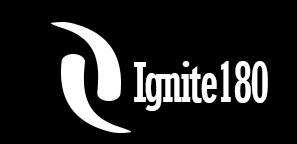
<style>
.page{position:relative;width:297px;height:144px;background:#000000}
.page>*{position:absolute;margin:0}
.t1{font:54px "Rockwell-Condensed";letter-spacing:-0.05em;color:#ffffff}
</style>
<div class="page">
<p class="t1" style="left:134px;top:61px;width:134px;height:50px">Ignite180</p>
</div>
